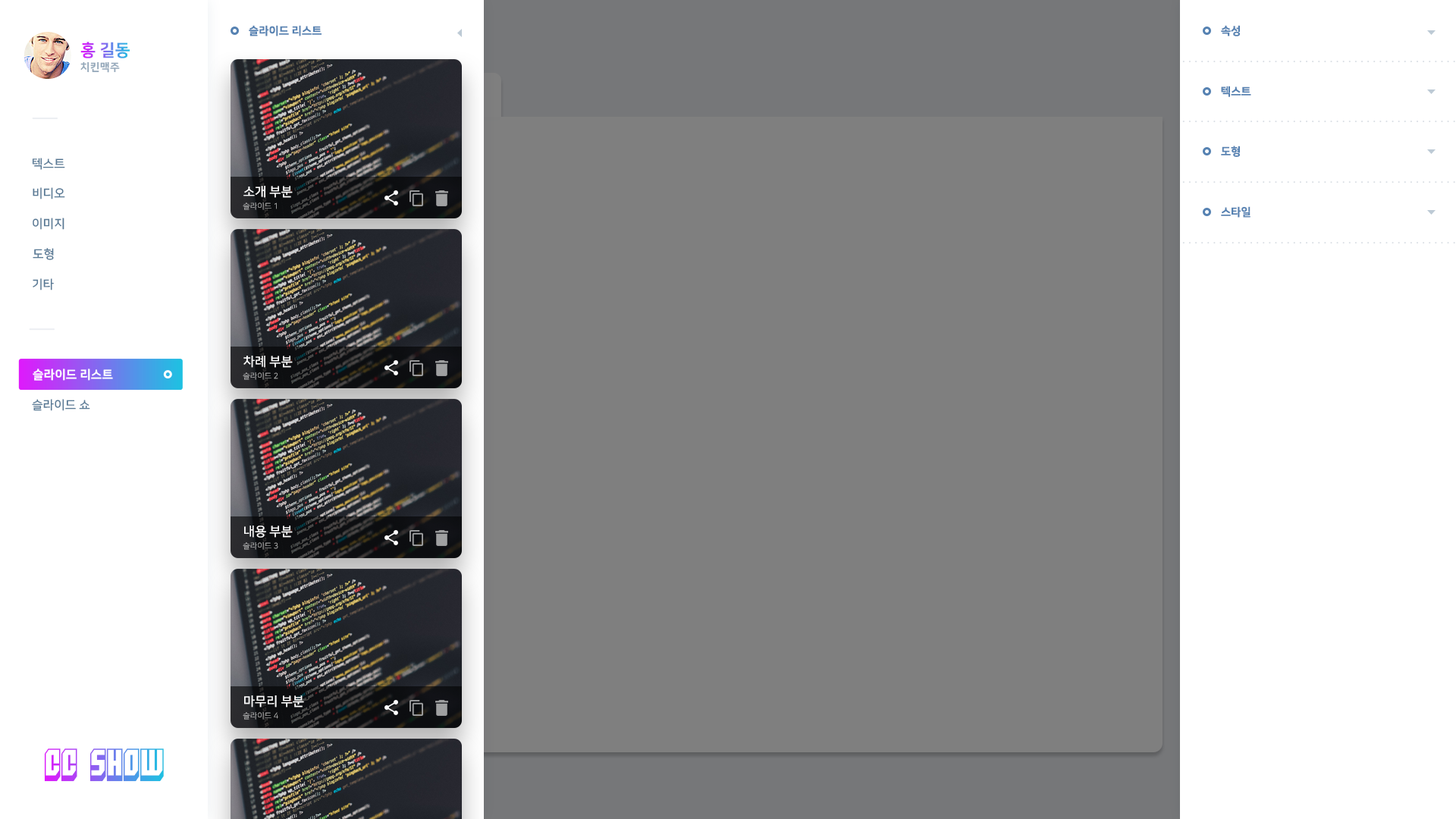
<style>
.page{position:relative;width:1456px;height:819px;background:#7f7f7f}
.page>*{position:absolute;margin:0}
.t1{font:11.1px "NanumSquareEB";color:#5682b2}
.t2{font:16.7px "NanumSquareEB";text-transform:uppercase}
.t3{font:10.6px "NanumSquareEB";letter-spacing:0.025em;color:#94a8ba;text-transform:uppercase}
.t4{font:12.1px "NanumSquareB";color:#597a96;text-transform:uppercase}
.t5{font:12.6px "NanumSquareB";color:#ffffff}
.t6{font:7.9px "NanumSquareR"}
.t7{font:12.1px "NanumSquareEB";color:#ffffff;text-transform:uppercase}
.t8{font:31.6px "Blockt"}
</style>
<div class="page">
<p class="t1" style="left:249px;top:25px;width:73px;height:11px">슬라이드 리스트</p>
<p class="t1" style="left:1221px;top:25px;width:19px;height:11px">속성</p>
<p class="t2" style="left:80px;top:42px;width:50px;height:16px">홍 길동</p>
<p class="t3" style="left:80px;top:61px;width:40px;height:12px">치킨맥주</p>
<p class="t1" style="left:1221px;top:86px;width:30px;height:11px">텍스트</p>
<p class="t1" style="left:1221px;top:146px;width:19px;height:11px">도형</p>
<p class="t4" style="left:32px;top:158px;width:33px;height:12px">텍스트</p>
<p class="t5" style="left:243px;top:186px;width:50px;height:12px">소개 부분</p>
<p class="t4" style="left:33px;top:187px;width:32px;height:12px">비디오</p>
<p class="t6" style="left:243px;top:202px;width:34px;height:8px">슬라이드 1</p>
<p class="t1" style="left:1221px;top:206px;width:29px;height:12px">스타일</p>
<p class="t4" style="left:33px;top:218px;width:31px;height:12px">이미지</p>
<p class="t4" style="left:33px;top:248px;width:21px;height:12px">도형</p>
<p class="t4" style="left:33px;top:278px;width:21px;height:12px">기타</p>
<p class="t5" style="left:243px;top:356px;width:50px;height:12px">차례 부분</p>
<p class="t7" style="left:33px;top:369px;width:80px;height:12px">슬라이드 리스트</p>
<p class="t6" style="left:243px;top:372px;width:35px;height:8px">슬라이드 2</p>
<p class="t4" style="left:32px;top:399px;width:58px;height:12px">슬라이드 쇼</p>
<p class="t5" style="left:244px;top:526px;width:49px;height:12px">내용 부분</p>
<p class="t6" style="left:243px;top:542px;width:35px;height:8px">슬라이드 3</p>
<p class="t5" style="left:244px;top:695px;width:60px;height:13px">마무리 부분</p>
<p class="t6" style="left:243px;top:712px;width:35px;height:8px">슬라이드 4</p>
<p class="t8" style="left:44px;top:748px;width:120px;height:34px">CC SHOW</p>
</div>
